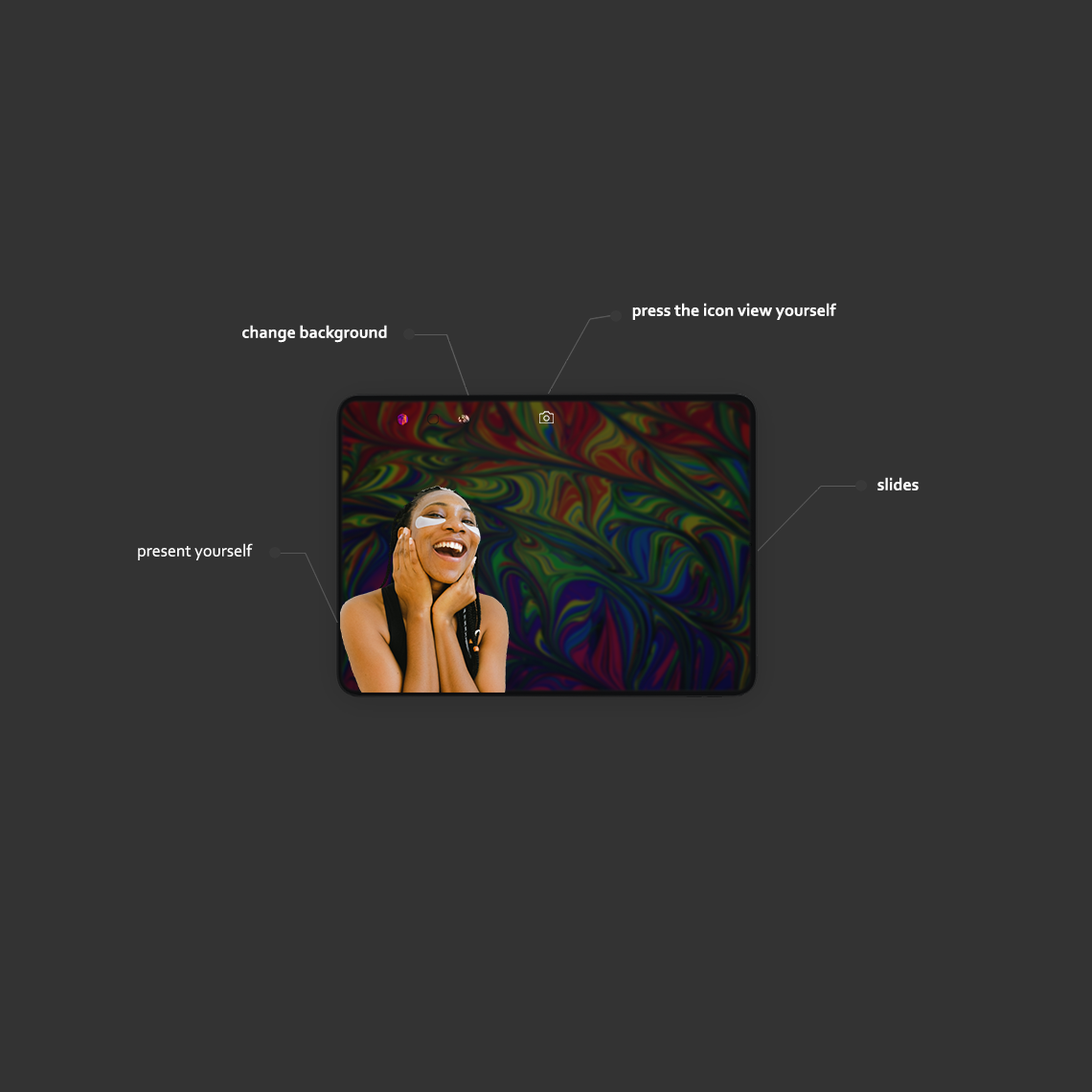
<style>
.page{position:relative;width:1092px;height:1092px;background:#333333}
.page>*{position:absolute;margin:0}
.t1{font:17.2px "Corbel-Bold";color:#ffffff}
.t2{font:17.2px "Corbel";color:#ffffff}
</style>
<div class="page">
<p class="t1" style="left:632px;top:303px;width:204px;height:17px">press the icon view yourself</p>
<p class="t1" style="left:242px;top:325px;width:145px;height:18px">change background</p>
<p class="t1" style="left:877px;top:477px;width:42px;height:13px">slides</p>
<p class="t2" style="left:138px;top:543px;width:115px;height:17px">present yourself</p>
</div>
